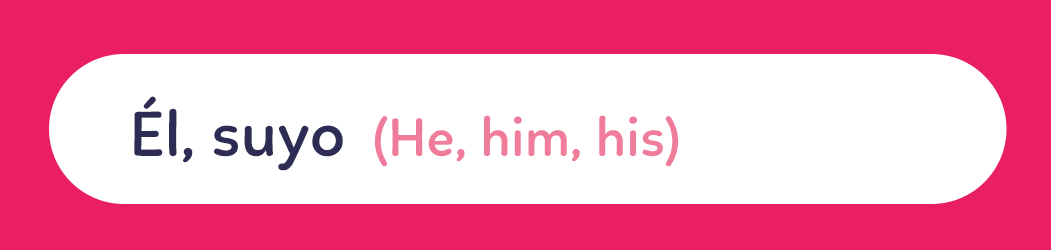
<style>
.page{position:relative;width:1051px;height:250px;background:#ffffff}
.page>*{position:absolute;margin:0}
.t1{font:65px "Linotte-SemiBold";color:#2c2c54}
.t2{font:65px "Linotte-SemiBold"}
.t3{font:55px "Linotte-SemiBold";color:#f07c9b}
</style>
<div class="page">
<p class="t1" style="left:134px;top:96px;width:209px;height:75px">Él, suyo</p>
<p class="t2" style="left:134px;top:108px;width:263px;height:63px">Ella, suya</p>
<p class="t3" style="left:374px;top:115px;width:305px;height:52px">(He, him, his)</p>
</div>
